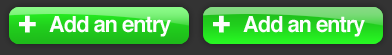
<style>
.page{position:relative;width:392px;height:55px}
.page>*{position:absolute;margin:0}
.t1{font:30px "Helvetica-Bold";letter-spacing:-0.05em;color:#fdfdfd;font-weight:bold}
.t2{font:22px "Helvetica-Bold";letter-spacing:-0.05em;color:#fdfdfd}
</style>
<div class="page">
<p class="t1" style="left:19px;top:15px;width:17px;height:18px">+</p>
<p class="t2" style="left:49px;top:16px;width:122px;height:21px">Add an entry</p>
<p class="t1" style="left:213px;top:15px;width:17px;height:18px">+</p>
<p class="t2" style="left:243px;top:16px;width:122px;height:21px">Add an entry</p>
</div>
